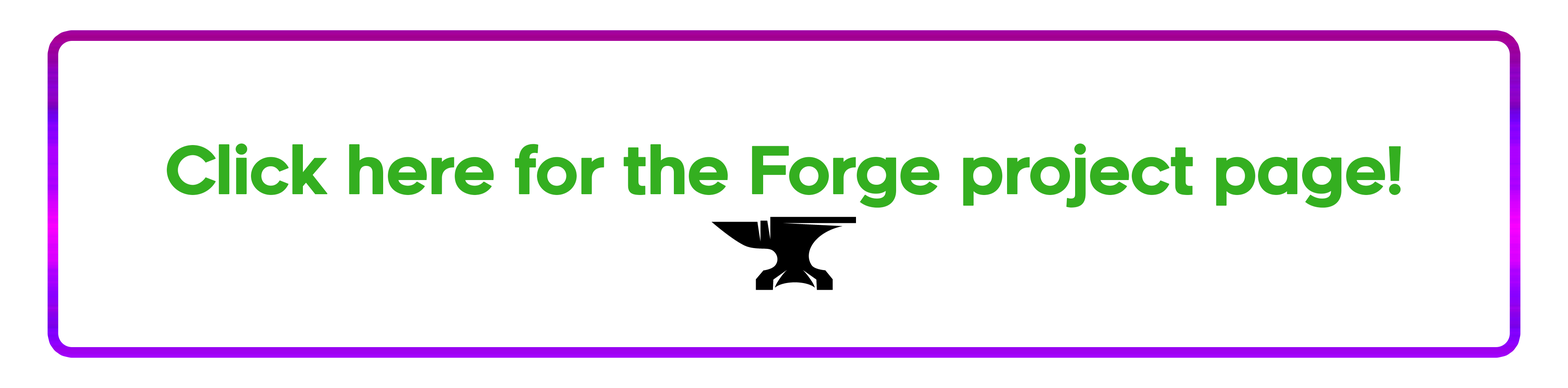
<style>
.page{position:relative;width:1568px;height:388px;background:#ffffff}
.page>*{position:absolute;margin:0}
.t1{font:65px "Renogare-Regular";letter-spacing:-0.05em;color:#34af20;font-weight:bold}
</style>
<div class="page">
<p class="t1" style="left:167px;top:144px;width:1234px;height:64px">Click here for the Forge project page!</p>
</div>
